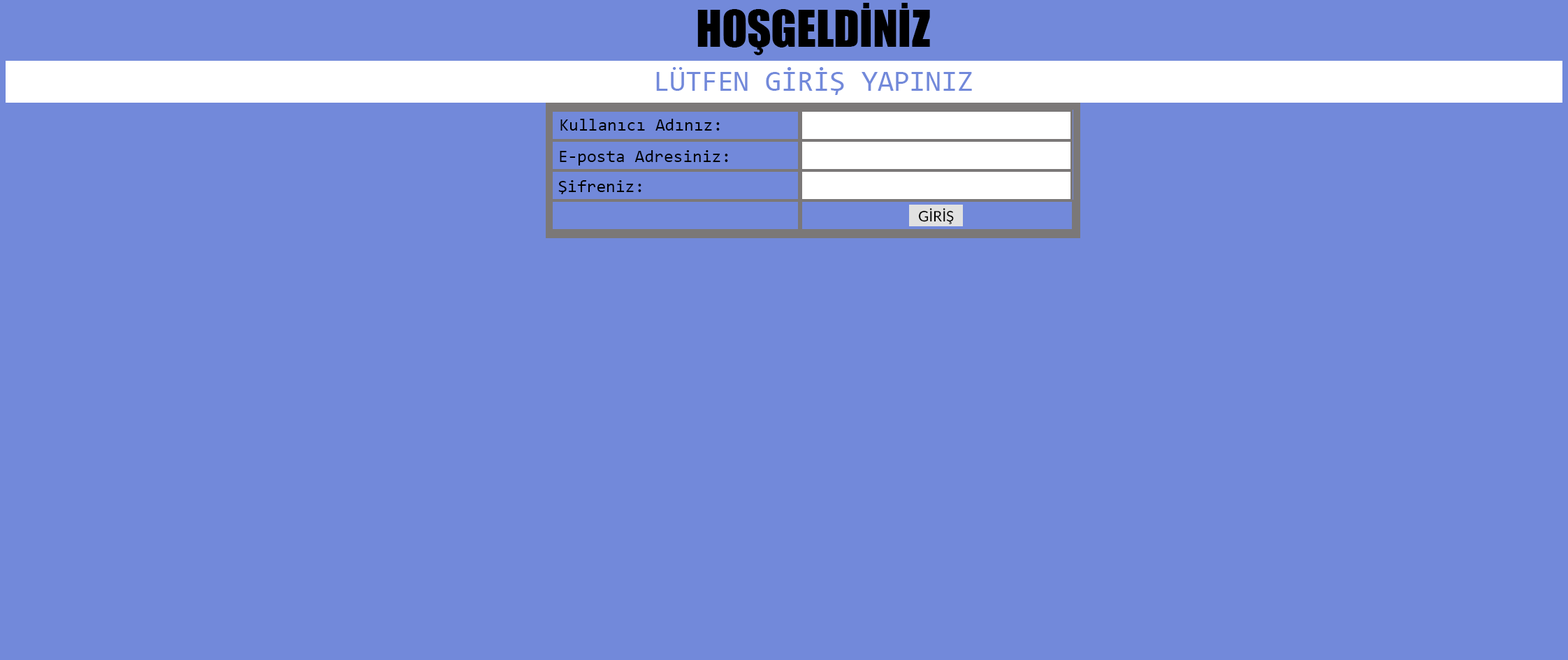
<style>
.page{position:relative;width:1568px;height:660px;background:#7289da}
.page>*{position:absolute;margin:0}
.t1{font:46.6px "Impact";color:#000000}
.t2{font:29.1px "Consolas";color:#7289da}
.t3{font:17.5px "Consolas";color:#000000}
.t4{font:14.6px "Lato-Regular";color:#000000}
</style>
<div class="page">
<p class="t1" style="left:697px;top:3px;width:233px;height:52px">HOŞGELDİNİZ</p>
<p class="t2" style="left:656px;top:67px;width:316px;height:28px">LÜTFEN GİRİŞ YAPINIZ</p>
<p class="t3" style="left:560px;top:119px;width:160px;height:12px">Kullanıcı Adınız:</p>
<p class="t3" style="left:560px;top:150px;width:168px;height:16px">E-posta Adresiniz:</p>
<p class="t3" style="left:558px;top:180px;width:83px;height:14px">Şifreniz:</p>
<p class="t4" style="left:918px;top:208px;width:36px;height:16px">GİRİŞ</p>
</div>
